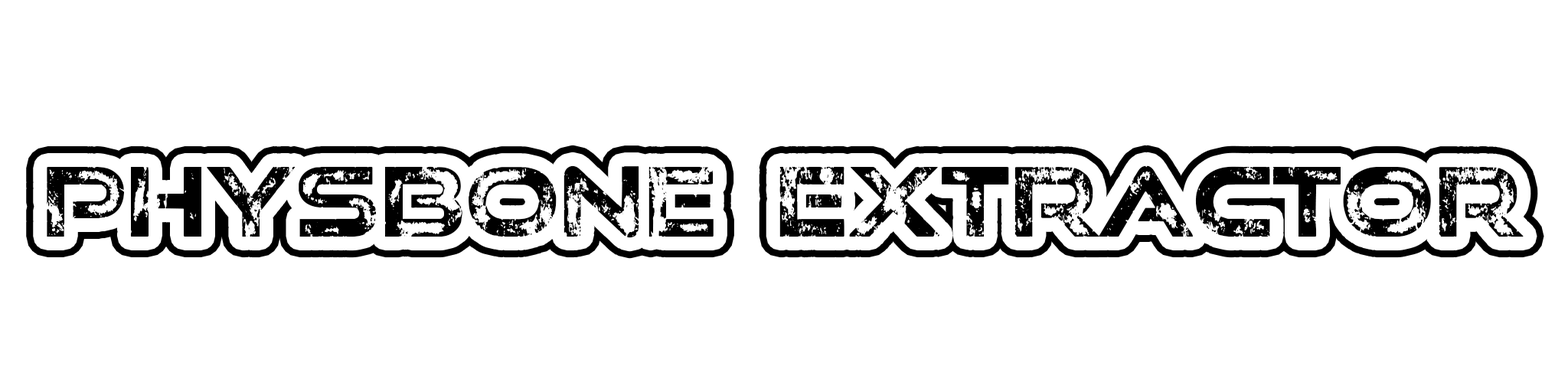
<style>
.page{position:relative;width:1568px;height:392px;background:#ffffff}
.page>*{position:absolute;margin:0}
.t1{font:95.7px "GoodTimesBadTimes-Regular";color:#000000}
</style>
<div class="page">
<p class="t1" style="left:47px;top:165px;width:1477px;height:73px">Physbone  Extractor</p>
</div>
